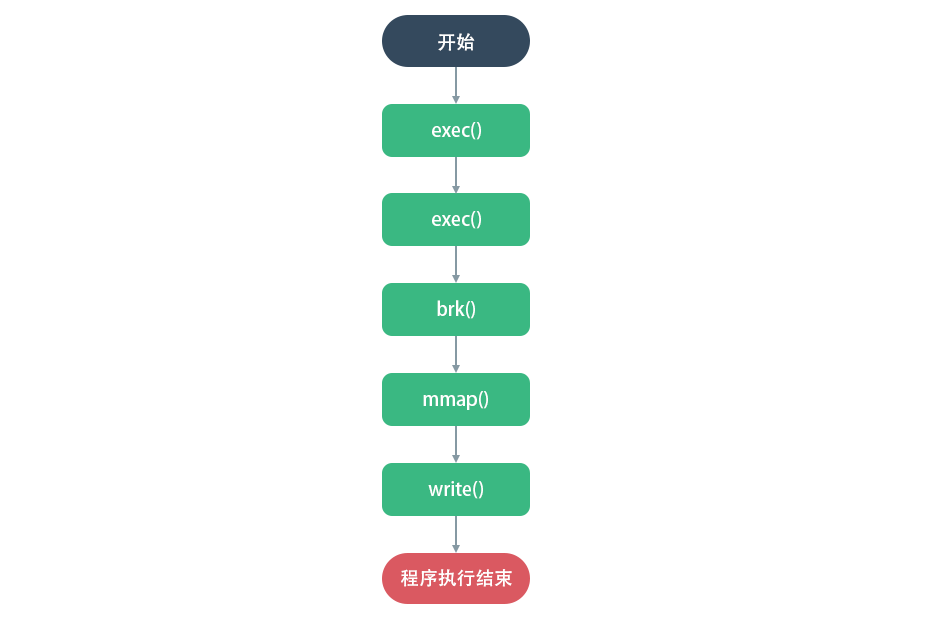
<style>
.page{position:relative;width:927px;height:622px;background:#ffffff}
.page>*{position:absolute;margin:0}
.t1{font:18.8px "AdobeHeitiStd-Regular";color:#ffffff}
</style>
<div class="page">
<p class="t1" style="left:438px;top:33px;width:37px;height:18px">开始</p>
<p class="t1" style="left:432px;top:122px;width:49px;height:18px">exec()</p>
<p class="t1" style="left:432px;top:211px;width:49px;height:18px">exec()</p>
<p class="t1" style="left:437px;top:300px;width:38px;height:19px">brk()</p>
<p class="t1" style="left:423px;top:391px;width:65px;height:19px">mmap()</p>
<p class="t1" style="left:428px;top:481px;width:55px;height:18px">write()</p>
<p class="t1" style="left:401px;top:569px;width:111px;height:18px">程序执行结束</p>
</div>
